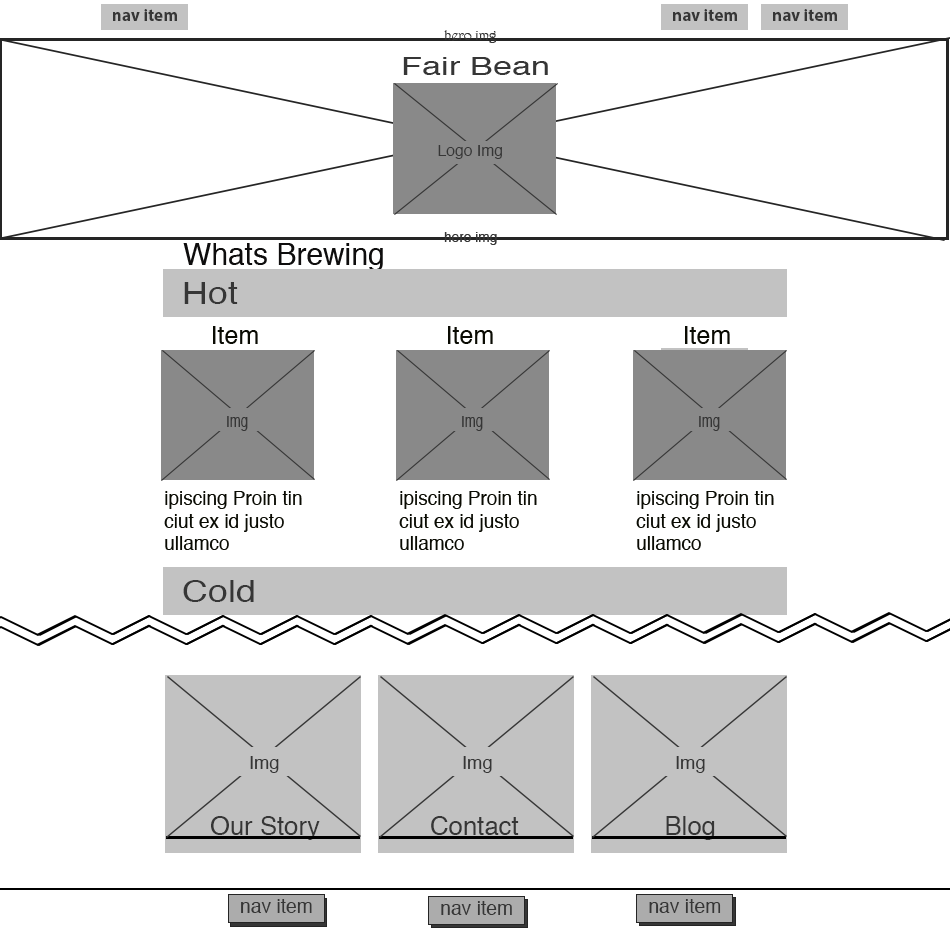
<style>
.page{position:relative;width:950px;height:940px;background:#ffffff}
.page>*{position:absolute;margin:0}
.t1{font:17.3px "MyriadPro-Bold";color:#363636}
.t2{font:13.7px "Harrington";color:#363636}
.t3{font:13.7px "MyriadPro-Bold";color:#363636}
.t4{font:24.3px "Helvetica";color:#363636;scale:1.41 1}
.t5{font:14.8px "Helvetica";color:#363636;scale:1.06 1}
.t6{font:13.7px "Helvetica";color:#363636}
.t7{font:30px "Helvetica";color:#0e0d0d}
.t8{font:30.7px "Helvetica";color:#363636;scale:1.16 1}
.t9{font:24.8px "Helvetica";color:#0a0b03}
.t10{font:16px "Helvetica";color:#363636;scale:0.82 1}
.t11{font:27.4px "MyriadPro-Bold";color:#363636;scale:0.82 1}
.t12{font:19px "Helvetica";color:#0a0b03}
.t13{font:17.8px "Helvetica";color:#363636;scale:1.03 1}
.t14{font:33.1px "MyriadPro-Bold";color:#363636;scale:1.03 1}
.t15{font:26.1px "Helvetica";color:#363636}
.t16{font:19.2px "Helvetica";color:#363636}
</style>
<div class="page">
<p class="t1" style="left:113px;top:9px;width:64px;height:12px">nav item</p>
<p class="t1" style="left:673px;top:9px;width:64px;height:12px">nav item</p>
<p class="t1" style="left:773px;top:9px;width:64px;height:12px">nav item</p>
<p class="t2" style="left:444px;top:30px;width:53px;height:13px"><span class="t3">      </span>hero img</p>
<p class="t4" style="left:403px;top:57px;width:145px;height:18px">Fair Bean</p>
<p class="t5" style="left:438px;top:145px;width:64px;height:14px">Logo Img</p>
<p class="t6" style="left:444px;top:232px;width:53px;height:13px"><span class="t3">      </span>hero img</p>
<p class="t7" style="left:183px;top:243px;width:200px;height:28px">Whats Brewing</p>
<p class="t8" style="left:184px;top:282px;width:54px;height:22px">Hot</p>
<p class="t9" style="left:213px;top:326px;width:45px;height:18px">Item</p>
<p class="t9" style="left:448px;top:326px;width:45px;height:18px">Item</p>
<p class="t9" style="left:685px;top:326px;width:45px;height:18px">Item</p>
<p class="t10" style="left:227px;top:416px;width:21px;height:15px"><span class="t11">   </span>Img</p>
<p class="t10" style="left:462px;top:416px;width:21px;height:15px"><span class="t11">   </span>Img</p>
<p class="t10" style="left:699px;top:416px;width:21px;height:15px"><span class="t11">   </span>Img</p>
<p class="t12" style="left:164px;top:491px;width:138px;height:59px">ipiscing Proin tin <br>ciut ex id justo <br>ullamco</p>
<p class="t12" style="left:399px;top:491px;width:138px;height:59px">ipiscing Proin tin <br>ciut ex id justo <br>ullamco</p>
<p class="t12" style="left:636px;top:491px;width:138px;height:59px">ipiscing Proin tin <br>ciut ex id justo <br>ullamco</p>
<p class="t8" style="left:183px;top:580px;width:71px;height:22px">Cold</p>
<p class="t13" style="left:250px;top:756px;width:29px;height:17px"><span class="t14">   </span>Img</p>
<p class="t13" style="left:463px;top:756px;width:29px;height:17px"><span class="t14">   </span>Img</p>
<p class="t13" style="left:676px;top:756px;width:29px;height:17px"><span class="t14">   </span>Img</p>
<p class="t15" style="left:211px;top:816px;width:109px;height:24px">Our Story</p>
<p class="t15" style="left:431px;top:816px;width:88px;height:19px">Contact</p>
<p class="t15" style="left:666px;top:816px;width:49px;height:24px">Blog</p>
<p class="t16" style="left:241px;top:899px;width:71px;height:14px">nav item</p>
<p class="t16" style="left:441px;top:901px;width:71px;height:14px">nav item</p>
<p class="t16" style="left:649px;top:899px;width:72px;height:14px">nav item</p>
</div>
